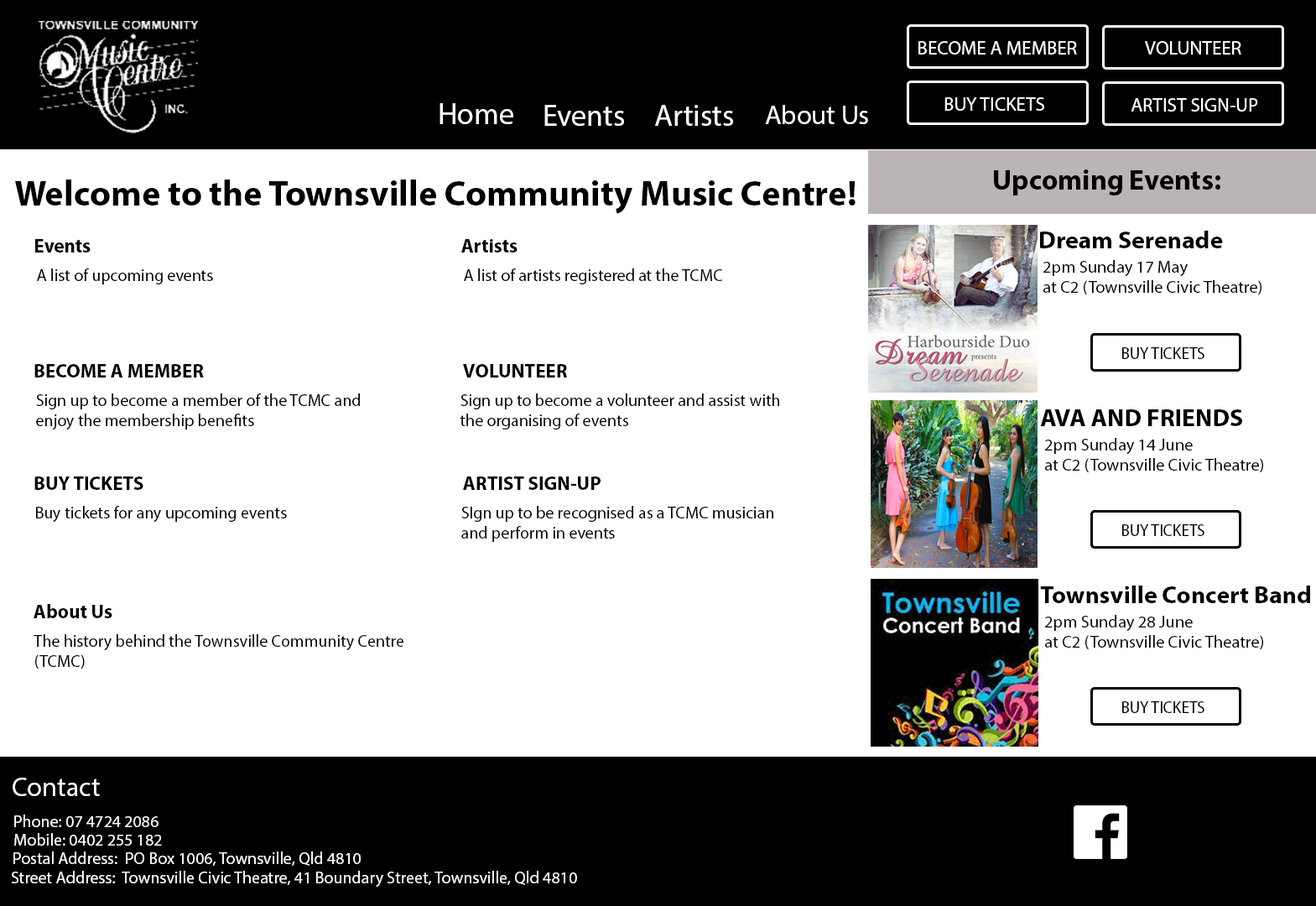
<style>
.page{position:relative;width:1316px;height:906px;background:#ffffff}
.page>*{position:absolute;margin:0}
.t1{font:19.3px "MyriadPro-Regular";color:#ffffff}
.t2{font:30.2px "MyriadPro-Regular";color:#ffffff}
.t3{font:27.1px "MyriadPro-Regular";color:#ffffff}
.t4{font:28.5px "MyriadPro-Bold";color:#000000}
.t5{font:36.1px "MyriadPro-Bold";color:#000000}
.t6{font:24.3px "MyriadPro-Bold";color:#000000}
.t7{font:19.3px "MyriadPro-Bold";color:#000000}
.t8{font:16.8px "MyriadPro-Regular";color:#000000}
.t9{font:16.7px "MyriadPro-Regular";color:#000000;scale:0.96 1}
.t10{font:16.8px "MyriadPro-Regular";color:#ffffff}
</style>
<div class="page">
<p class="t1" style="left:919px;top:41px;width:158px;height:14px">BECOME A MEMBER</p>
<p class="t1" style="left:1145px;top:41px;width:97px;height:14px">VOLUNTEER</p>
<p class="t1" style="left:945px;top:97px;width:99px;height:14px">BUY TICKETS</p>
<p class="t1" style="left:1131px;top:98px;width:127px;height:14px">ARTIST SIGN-UP</p>
<p class="t2" style="left:440px;top:103px;width:73px;height:21px">Home</p>
<p class="t2" style="left:544px;top:105px;width:80px;height:21px">Events</p>
<p class="t2" style="left:655px;top:105px;width:78px;height:21px">Artists</p>
<p class="t3" style="left:765px;top:105px;width:103px;height:19px">About Us</p>
<p class="t4" style="left:994px;top:169px;width:227px;height:26px">Upcoming Events:</p>
<p class="t5" style="left:15px;top:180px;width:841px;height:34px">Welcome to the Townsville Community Music Centre!</p>
<p class="t6" style="left:1040px;top:231px;width:183px;height:17px">Dream Serenade</p>
<p class="t7" style="left:35px;top:239px;width:56px;height:13px">Events</p>
<p class="t7" style="left:461px;top:239px;width:57px;height:13px">Artists</p>
<p class="t8" style="left:37px;top:268px;width:176px;height:16px">A list of upcoming events</p>
<p class="t8" style="left:464px;top:268px;width:259px;height:16px">A list of artists registered at the TCMC</p>
<p class="t8" style="left:1044px;top:260px;width:218px;height:34px">2pm Sunday 17 May <br>at C2 (Townsville Civic Theatre)</p>
<p class="t9" style="left:1122px;top:347px;width:83px;height:12px">BUY TICKETS</p>
<p class="t7" style="left:34px;top:364px;width:170px;height:13px">BECOME A MEMBER</p>
<p class="t7" style="left:463px;top:364px;width:104px;height:13px">VOLUNTEER</p>
<p class="t8" style="left:36px;top:393px;width:324px;height:37px">Sign up to become a member of the TCMC and<br>enjoy the membership benefits</p>
<p class="t8" style="left:460px;top:393px;width:319px;height:37px">Sign up to become a volunteer and assist with<br>the organising of events</p>
<p class="t6" style="left:1040px;top:409px;width:202px;height:17px">AVA AND FRIENDS</p>
<p class="t8" style="left:1045px;top:438px;width:218px;height:34px">2pm Sunday 14 June <br>at C2 (Townsville Civic Theatre)</p>
<p class="t7" style="left:34px;top:476px;width:109px;height:14px">BUY TICKETS</p>
<p class="t7" style="left:463px;top:476px;width:138px;height:14px">ARTIST SIGN-UP</p>
<p class="t8" style="left:36px;top:506px;width:251px;height:16px">Buy tickets for any upcoming events</p>
<p class="t8" style="left:461px;top:506px;width:312px;height:36px">SIgn up to be recognised as a TCMC musician<br>and perform in events</p>
<p class="t9" style="left:1122px;top:524px;width:83px;height:12px">BUY TICKETS</p>
<p class="t6" style="left:1040px;top:586px;width:270px;height:17px">Townsville Concert Band</p>
<p class="t7" style="left:34px;top:604px;width:78px;height:14px">About Us</p>
<p class="t8" style="left:1045px;top:615px;width:218px;height:34px">2pm Sunday 28 June<br>at C2 (Townsville Civic Theatre)</p>
<p class="t8" style="left:34px;top:634px;width:369px;height:35px">The history behind the Townsville Community Centre<br>(TCMC)</p>
<p class="t9" style="left:1122px;top:701px;width:83px;height:12px">BUY TICKETS</p>
<p class="t3" style="left:13px;top:778px;width:87px;height:18px">Contact</p>
<p class="t10" style="left:14px;top:815px;width:145px;height:12px">Phone: 07 4724 2086</p>
<p class="t10" style="left:14px;top:833px;width:148px;height:13px">Mobile: 0402 255 182</p>
<p class="t10" style="left:13px;top:851px;width:348px;height:15px">Postal Address:  PO Box 1006, Townsville, Qld 4810</p>
<p class="t10" style="left:12px;top:871px;width:565px;height:16px">Street Address:  Townsville Civic Theatre, 41 Boundary Street, Townsville, Qld 4810</p>
</div>
